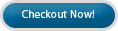
<style>
.page{position:relative;width:118px;height:31px}
.page>*{position:absolute;margin:0}
.t1{font:11px "Myriad-Roman";letter-spacing:0.02em;color:#ffffff}
</style>
<div class="page">
<p class="t1" style="left:22px;top:10px;width:73px;height:8px">Checkout Now!</p>
</div>
